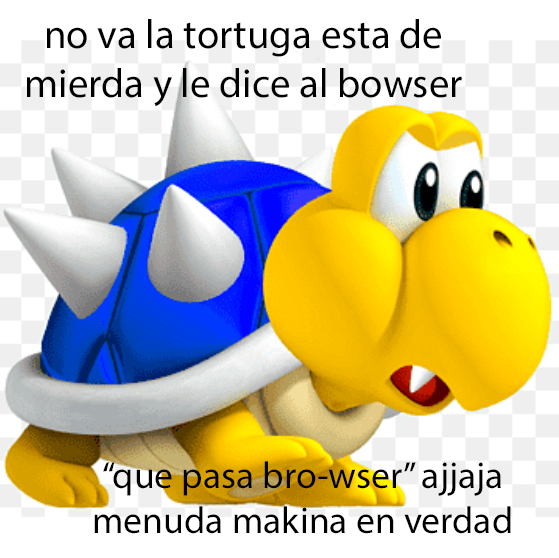
<style>
.page{position:relative;width:559px;height:558px;background:#ffffff}
.page>*{position:absolute;margin:0}
.t1{font:40.9px "MyriadPro-Regular";color:#000000}
.t2{font:37.8px "MyriadPro-Regular";color:#000000}
</style>
<div class="page">
<p class="t1" style="left:26px;top:19px;width:436px;height:87px;text-align:center">no va la tortuga esta de<br>mierda y le dice al bowser</p>
<p class="t2" style="left:94px;top:461px;width:417px;height:73px;text-align:center">“que pasa bro-wser” ajjaja<br>menuda makina en verdad</p>
</div>
